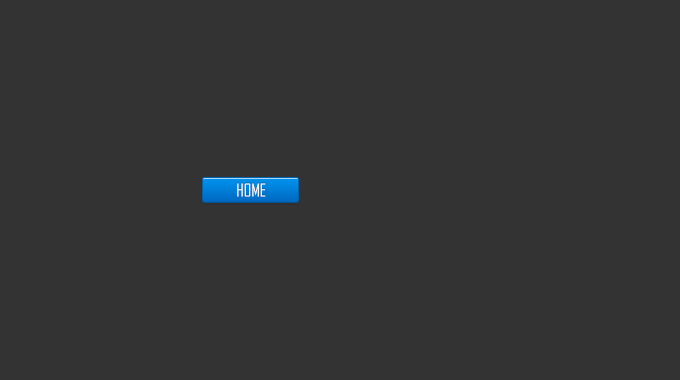
<style>
.page{position:relative;width:680px;height:380px;background:#333333}
.page>*{position:absolute;margin:0}
.t1{font:17px "AgencyFB-Reg";color:#fcfcfc}
</style>
<div class="page">
<p class="t1" style="left:237px;top:183px;width:29px;height:14px">HOME</p>
</div>
